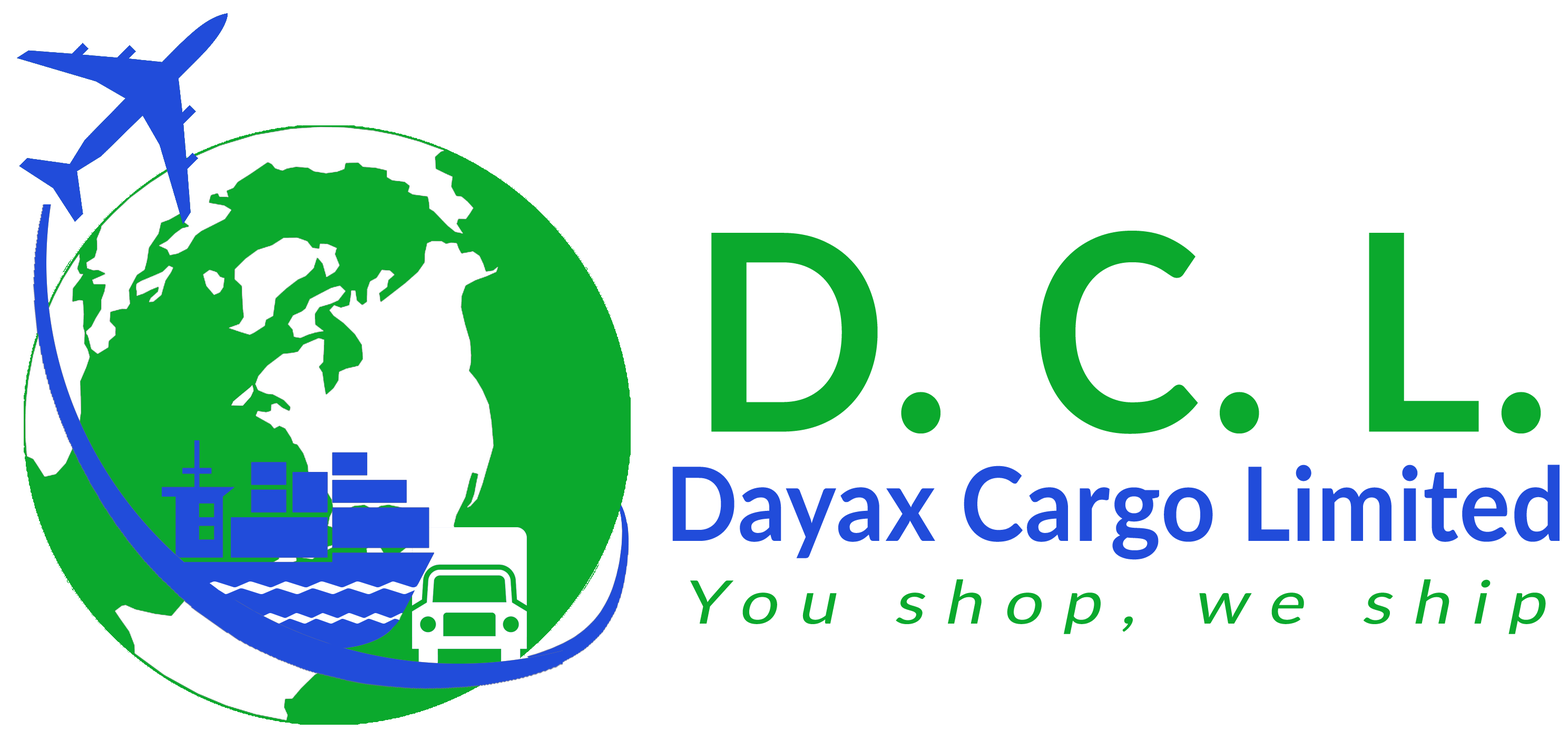
<style>
.page{position:relative;width:1568px;height:750px;background:#ffffff}
.page>*{position:absolute;margin:0}
.t1{font:274.8px "Lato-Bold";letter-spacing:0.03em;color:#0ba92d;scale:0.94 1}
.t2{font:102.4px "Lato-Bold";letter-spacing:0.01em;color:#214cda;scale:0.93 1}
.t3{font:60px "Lato-Regular";letter-spacing:0.29em;color:#0ba92d;font-style:italic;scale:1.15 1}
</style>
<div class="page">
<p class="t1" style="left:711px;top:231px;width:830px;height:203px">D. C. L.</p>
<p class="t2" style="left:672px;top:465px;width:888px;height:95px">Dayax Cargo Limited</p>
<p class="t3" style="left:690px;top:580px;width:856px;height:54px">You shop, we ship</p>
</div>
